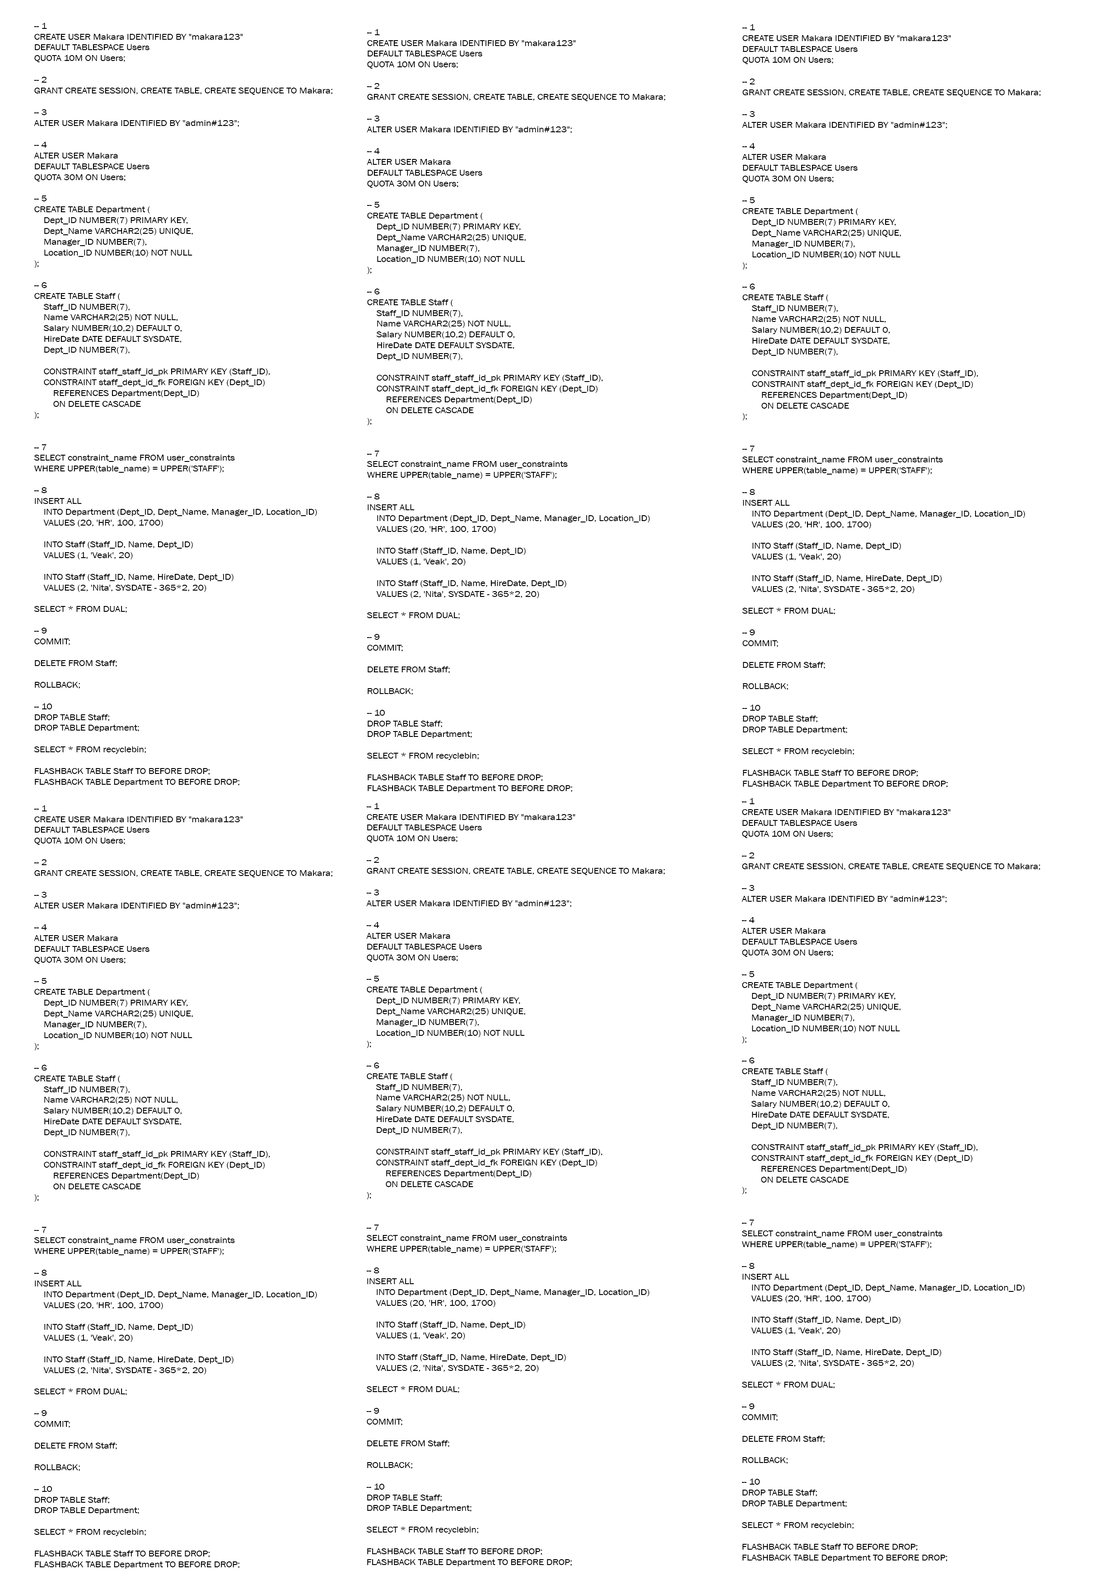
<style>
.page{position:relative;width:1120px;height:1584px;background:#ffffff}
.page>*{position:absolute;margin:0}
.t1{font:9px "AA-Khmer-AngDaunsok";letter-spacing:-0.01em;color:#000000;scale:1.1 1}
</style>
<div class="page">
<p class="t1" style="left:34px;top:23px;width:298px;height:763px">-- 1<br>CREATE USER Makara IDENTIFIED BY "makara123"<br>DEFAULT TABLESPACE Users<br>QUOTA 10M ON Users;<br><br>-- 2<br>GRANT CREATE SESSION, CREATE TABLE, CREATE SEQUENCE TO Makara;<br><br>-- 3<br>ALTER USER Makara IDENTIFIED BY "admin#123";<br><br>-- 4<br>ALTER USER Makara<br>DEFAULT TABLESPACE Users<br>QUOTA 30M ON Users;<br><br>-- 5<br>CREATE TABLE Department (<br>    Dept_ID NUMBER(7) PRIMARY KEY,<br>    Dept_Name VARCHAR2(25) UNIQUE,<br>    Manager_ID NUMBER(7),<br>    Location_ID NUMBER(10) NOT NULL<br>);<br><br>-- 6<br>CREATE TABLE Staff (<br>    Staff_ID NUMBER(7),<br>    Name VARCHAR2(25) NOT NULL,<br>    Salary NUMBER(10,2) DEFAULT 0,<br>    HireDate DATE DEFAULT SYSDATE,<br>    Dept_ID NUMBER(7),<br><br>    CONSTRAINT staff_staff_id_pk PRIMARY KEY (Staff_ID),<br>    CONSTRAINT staff_dept_id_fk FOREIGN KEY (Dept_ID)<br>        REFERENCES Department(Dept_ID)<br>        ON DELETE CASCADE<br>);<br><br><br>-- 7<br>SELECT constraint_name FROM user_constraints<br>WHERE UPPER(table_name) = UPPER('STAFF');<br><br>-- 8<br>INSERT ALL<br>    INTO Department (Dept_ID, Dept_Name, Manager_ID, Location_ID)<br>    VALUES (20, 'HR', 100, 1700)<br><br>    INTO Staff (Staff_ID, Name, Dept_ID)<br>    VALUES (1, 'Veak', 20)<br><br>    INTO Staff (Staff_ID, Name, HireDate, Dept_ID)<br>    VALUES (2, 'Nita', SYSDATE - 365*2, 20)<br><br>SELECT * FROM DUAL;<br><br>-- 9<br>COMMIT;<br><br>DELETE FROM Staff;<br><br>ROLLBACK;<br><br>-- 10<br>DROP TABLE Staff;<br>DROP TABLE Department;<br><br>SELECT * FROM recyclebin;<br><br>FLASHBACK TABLE Staff TO BEFORE DROP;<br>FLASHBACK TABLE Department TO BEFORE DROP;</p>
<p class="t1" style="left:367px;top:29px;width:298px;height:763px">-- 1<br>CREATE USER Makara IDENTIFIED BY "makara123"<br>DEFAULT TABLESPACE Users<br>QUOTA 10M ON Users;<br><br>-- 2<br>GRANT CREATE SESSION, CREATE TABLE, CREATE SEQUENCE TO Makara;<br><br>-- 3<br>ALTER USER Makara IDENTIFIED BY "admin#123";<br><br>-- 4<br>ALTER USER Makara<br>DEFAULT TABLESPACE Users<br>QUOTA 30M ON Users;<br><br>-- 5<br>CREATE TABLE Department (<br>    Dept_ID NUMBER(7) PRIMARY KEY,<br>    Dept_Name VARCHAR2(25) UNIQUE,<br>    Manager_ID NUMBER(7),<br>    Location_ID NUMBER(10) NOT NULL<br>);<br><br>-- 6<br>CREATE TABLE Staff (<br>    Staff_ID NUMBER(7),<br>    Name VARCHAR2(25) NOT NULL,<br>    Salary NUMBER(10,2) DEFAULT 0,<br>    HireDate DATE DEFAULT SYSDATE,<br>    Dept_ID NUMBER(7),<br><br>    CONSTRAINT staff_staff_id_pk PRIMARY KEY (Staff_ID),<br>    CONSTRAINT staff_dept_id_fk FOREIGN KEY (Dept_ID)<br>        REFERENCES Department(Dept_ID)<br>        ON DELETE CASCADE<br>);<br><br><br>-- 7<br>SELECT constraint_name FROM user_constraints<br>WHERE UPPER(table_name) = UPPER('STAFF');<br><br>-- 8<br>INSERT ALL<br>    INTO Department (Dept_ID, Dept_Name, Manager_ID, Location_ID)<br>    VALUES (20, 'HR', 100, 1700)<br><br>    INTO Staff (Staff_ID, Name, Dept_ID)<br>    VALUES (1, 'Veak', 20)<br><br>    INTO Staff (Staff_ID, Name, HireDate, Dept_ID)<br>    VALUES (2, 'Nita', SYSDATE - 365*2, 20)<br><br>SELECT * FROM DUAL;<br><br>-- 9<br>COMMIT;<br><br>DELETE FROM Staff;<br><br>ROLLBACK;<br><br>-- 10<br>DROP TABLE Staff;<br>DROP TABLE Department;<br><br>SELECT * FROM recyclebin;<br><br>FLASHBACK TABLE Staff TO BEFORE DROP;<br>FLASHBACK TABLE Department TO BEFORE DROP;</p>
<p class="t1" style="left:742px;top:24px;width:298px;height:764px">-- 1<br>CREATE USER Makara IDENTIFIED BY "makara123"<br>DEFAULT TABLESPACE Users<br>QUOTA 10M ON Users;<br><br>-- 2<br>GRANT CREATE SESSION, CREATE TABLE, CREATE SEQUENCE TO Makara;<br><br>-- 3<br>ALTER USER Makara IDENTIFIED BY "admin#123";<br><br>-- 4<br>ALTER USER Makara<br>DEFAULT TABLESPACE Users<br>QUOTA 30M ON Users;<br><br>-- 5<br>CREATE TABLE Department (<br>    Dept_ID NUMBER(7) PRIMARY KEY,<br>    Dept_Name VARCHAR2(25) UNIQUE,<br>    Manager_ID NUMBER(7),<br>    Location_ID NUMBER(10) NOT NULL<br>);<br><br>-- 6<br>CREATE TABLE Staff (<br>    Staff_ID NUMBER(7),<br>    Name VARCHAR2(25) NOT NULL,<br>    Salary NUMBER(10,2) DEFAULT 0,<br>    HireDate DATE DEFAULT SYSDATE,<br>    Dept_ID NUMBER(7),<br><br>    CONSTRAINT staff_staff_id_pk PRIMARY KEY (Staff_ID),<br>    CONSTRAINT staff_dept_id_fk FOREIGN KEY (Dept_ID)<br>        REFERENCES Department(Dept_ID)<br>        ON DELETE CASCADE<br>);<br><br><br>-- 7<br>SELECT constraint_name FROM user_constraints<br>WHERE UPPER(table_name) = UPPER('STAFF');<br><br>-- 8<br>INSERT ALL<br>    INTO Department (Dept_ID, Dept_Name, Manager_ID, Location_ID)<br>    VALUES (20, 'HR', 100, 1700)<br><br>    INTO Staff (Staff_ID, Name, Dept_ID)<br>    VALUES (1, 'Veak', 20)<br><br>    INTO Staff (Staff_ID, Name, HireDate, Dept_ID)<br>    VALUES (2, 'Nita', SYSDATE - 365*2, 20)<br><br>SELECT * FROM DUAL;<br><br>-- 9<br>COMMIT;<br><br>DELETE FROM Staff;<br><br>ROLLBACK;<br><br>-- 10<br>DROP TABLE Staff;<br>DROP TABLE Department;<br><br>SELECT * FROM recyclebin;<br><br>FLASHBACK TABLE Staff TO BEFORE DROP;<br>FLASHBACK TABLE Department TO BEFORE DROP;</p>
<p class="t1" style="left:741px;top:798px;width:299px;height:764px">-- 1<br>CREATE USER Makara IDENTIFIED BY "makara123"<br>DEFAULT TABLESPACE Users<br>QUOTA 10M ON Users;<br><br>-- 2<br>GRANT CREATE SESSION, CREATE TABLE, CREATE SEQUENCE TO Makara;<br><br>-- 3<br>ALTER USER Makara IDENTIFIED BY "admin#123";<br><br>-- 4<br>ALTER USER Makara<br>DEFAULT TABLESPACE Users<br>QUOTA 30M ON Users;<br><br>-- 5<br>CREATE TABLE Department (<br>    Dept_ID NUMBER(7) PRIMARY KEY,<br>    Dept_Name VARCHAR2(25) UNIQUE,<br>    Manager_ID NUMBER(7),<br>    Location_ID NUMBER(10) NOT NULL<br>);<br><br>-- 6<br>CREATE TABLE Staff (<br>    Staff_ID NUMBER(7),<br>    Name VARCHAR2(25) NOT NULL,<br>    Salary NUMBER(10,2) DEFAULT 0,<br>    HireDate DATE DEFAULT SYSDATE,<br>    Dept_ID NUMBER(7),<br><br>    CONSTRAINT staff_staff_id_pk PRIMARY KEY (Staff_ID),<br>    CONSTRAINT staff_dept_id_fk FOREIGN KEY (Dept_ID)<br>        REFERENCES Department(Dept_ID)<br>        ON DELETE CASCADE<br>);<br><br><br>-- 7<br>SELECT constraint_name FROM user_constraints<br>WHERE UPPER(table_name) = UPPER('STAFF');<br><br>-- 8<br>INSERT ALL<br>    INTO Department (Dept_ID, Dept_Name, Manager_ID, Location_ID)<br>    VALUES (20, 'HR', 100, 1700)<br><br>    INTO Staff (Staff_ID, Name, Dept_ID)<br>    VALUES (1, 'Veak', 20)<br><br>    INTO Staff (Staff_ID, Name, HireDate, Dept_ID)<br>    VALUES (2, 'Nita', SYSDATE - 365*2, 20)<br><br>SELECT * FROM DUAL;<br><br>-- 9<br>COMMIT;<br><br>DELETE FROM Staff;<br><br>ROLLBACK;<br><br>-- 10<br>DROP TABLE Staff;<br>DROP TABLE Department;<br><br>SELECT * FROM recyclebin;<br><br>FLASHBACK TABLE Staff TO BEFORE DROP;<br>FLASHBACK TABLE Department TO BEFORE DROP;</p>
<p class="t1" style="left:34px;top:805px;width:298px;height:763px">-- 1<br>CREATE USER Makara IDENTIFIED BY "makara123"<br>DEFAULT TABLESPACE Users<br>QUOTA 10M ON Users;<br><br>-- 2<br>GRANT CREATE SESSION, CREATE TABLE, CREATE SEQUENCE TO Makara;<br><br>-- 3<br>ALTER USER Makara IDENTIFIED BY "admin#123";<br><br>-- 4<br>ALTER USER Makara<br>DEFAULT TABLESPACE Users<br>QUOTA 30M ON Users;<br><br>-- 5<br>CREATE TABLE Department (<br>    Dept_ID NUMBER(7) PRIMARY KEY,<br>    Dept_Name VARCHAR2(25) UNIQUE,<br>    Manager_ID NUMBER(7),<br>    Location_ID NUMBER(10) NOT NULL<br>);<br><br>-- 6<br>CREATE TABLE Staff (<br>    Staff_ID NUMBER(7),<br>    Name VARCHAR2(25) NOT NULL,<br>    Salary NUMBER(10,2) DEFAULT 0,<br>    HireDate DATE DEFAULT SYSDATE,<br>    Dept_ID NUMBER(7),<br><br>    CONSTRAINT staff_staff_id_pk PRIMARY KEY (Staff_ID),<br>    CONSTRAINT staff_dept_id_fk FOREIGN KEY (Dept_ID)<br>        REFERENCES Department(Dept_ID)<br>        ON DELETE CASCADE<br>);<br><br><br>-- 7<br>SELECT constraint_name FROM user_constraints<br>WHERE UPPER(table_name) = UPPER('STAFF');<br><br>-- 8<br>INSERT ALL<br>    INTO Department (Dept_ID, Dept_Name, Manager_ID, Location_ID)<br>    VALUES (20, 'HR', 100, 1700)<br><br>    INTO Staff (Staff_ID, Name, Dept_ID)<br>    VALUES (1, 'Veak', 20)<br><br>    INTO Staff (Staff_ID, Name, HireDate, Dept_ID)<br>    VALUES (2, 'Nita', SYSDATE - 365*2, 20)<br><br>SELECT * FROM DUAL;<br><br>-- 9<br>COMMIT;<br><br>DELETE FROM Staff;<br><br>ROLLBACK;<br><br>-- 10<br>DROP TABLE Staff;<br>DROP TABLE Department;<br><br>SELECT * FROM recyclebin;<br><br>FLASHBACK TABLE Staff TO BEFORE DROP;<br>FLASHBACK TABLE Department TO BEFORE DROP;</p>
<p class="t1" style="left:366px;top:803px;width:299px;height:763px">-- 1<br>CREATE USER Makara IDENTIFIED BY "makara123"<br>DEFAULT TABLESPACE Users<br>QUOTA 10M ON Users;<br><br>-- 2<br>GRANT CREATE SESSION, CREATE TABLE, CREATE SEQUENCE TO Makara;<br><br>-- 3<br>ALTER USER Makara IDENTIFIED BY "admin#123";<br><br>-- 4<br>ALTER USER Makara<br>DEFAULT TABLESPACE Users<br>QUOTA 30M ON Users;<br><br>-- 5<br>CREATE TABLE Department (<br>    Dept_ID NUMBER(7) PRIMARY KEY,<br>    Dept_Name VARCHAR2(25) UNIQUE,<br>    Manager_ID NUMBER(7),<br>    Location_ID NUMBER(10) NOT NULL<br>);<br><br>-- 6<br>CREATE TABLE Staff (<br>    Staff_ID NUMBER(7),<br>    Name VARCHAR2(25) NOT NULL,<br>    Salary NUMBER(10,2) DEFAULT 0,<br>    HireDate DATE DEFAULT SYSDATE,<br>    Dept_ID NUMBER(7),<br><br>    CONSTRAINT staff_staff_id_pk PRIMARY KEY (Staff_ID),<br>    CONSTRAINT staff_dept_id_fk FOREIGN KEY (Dept_ID)<br>        REFERENCES Department(Dept_ID)<br>        ON DELETE CASCADE<br>);<br><br><br>-- 7<br>SELECT constraint_name FROM user_constraints<br>WHERE UPPER(table_name) = UPPER('STAFF');<br><br>-- 8<br>INSERT ALL<br>    INTO Department (Dept_ID, Dept_Name, Manager_ID, Location_ID)<br>    VALUES (20, 'HR', 100, 1700)<br><br>    INTO Staff (Staff_ID, Name, Dept_ID)<br>    VALUES (1, 'Veak', 20)<br><br>    INTO Staff (Staff_ID, Name, HireDate, Dept_ID)<br>    VALUES (2, 'Nita', SYSDATE - 365*2, 20)<br><br>SELECT * FROM DUAL;<br><br>-- 9<br>COMMIT;<br><br>DELETE FROM Staff;<br><br>ROLLBACK;<br><br>-- 10<br>DROP TABLE Staff;<br>DROP TABLE Department;<br><br>SELECT * FROM recyclebin;<br><br>FLASHBACK TABLE Staff TO BEFORE DROP;<br>FLASHBACK TABLE Department TO BEFORE DROP;</p>
</div>
